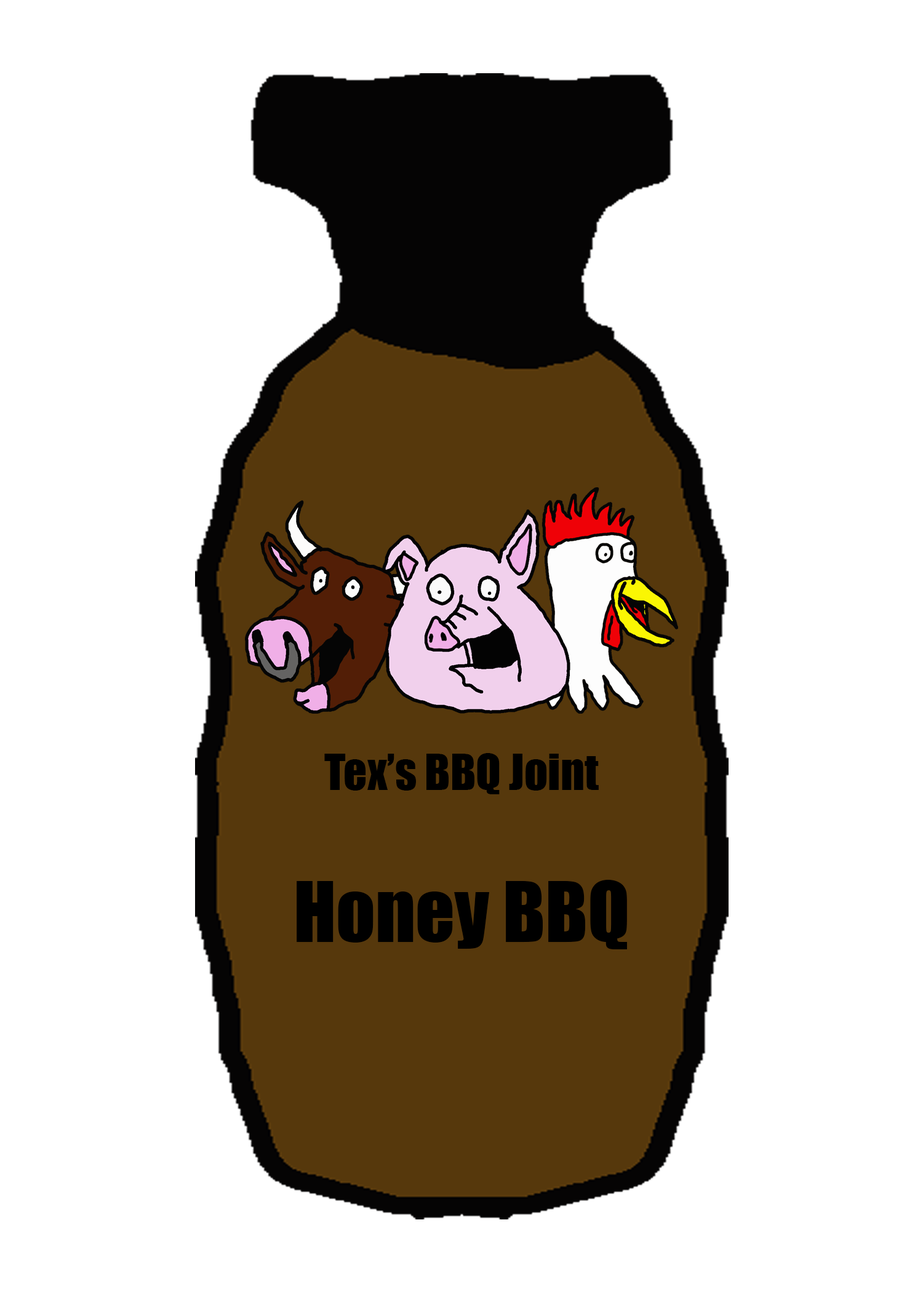
<style>
.page{position:relative;width:923px;height:1292px;background:#ffffff}
.page>*{position:absolute;margin:0}
.t1{font:46.1px "Impact";color:#000000}
.t2{font:76.9px "Impact";color:#000000}
</style>
<div class="page">
<p class="t1" style="left:324px;top:753px;width:275px;height:41px">Tex’s BBQ Joint</p>
<p class="t2" style="left:297px;top:880px;width:330px;height:69px">Honey BBQ</p>
</div>
